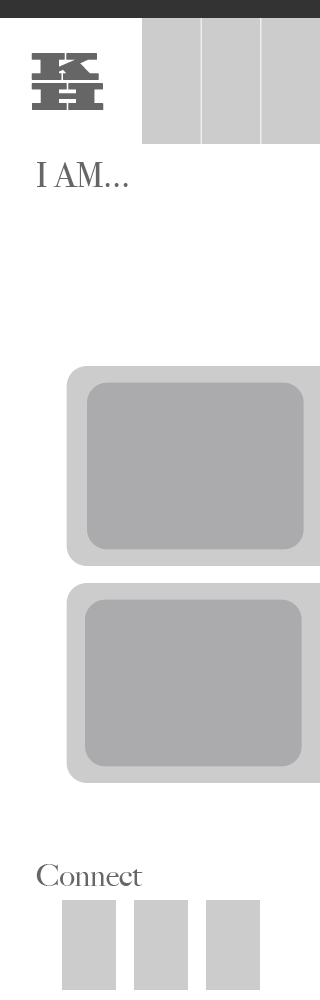
<style>
.page{position:relative;width:320px;height:1000px;background:#ffffff}
.page>*{position:absolute;margin:0}
.t1{font:36px "BlackoakStd";color:#666666}
.t2{font:36px "BodoniSvtyTwoITCTTBook";color:#666666}
.t3{font:30px "BigCaslon-Medium";color:#666666}
</style>
<div class="page">
<p class="t1" style="left:31px;top:53px;width:73px;height:57px">KH</p>
<p class="t2" style="left:37px;top:162px;width:91px;height:25px">I AM...</p>
<p class="t3" style="left:36px;top:864px;width:107px;height:22px">Connect</p>
</div>
